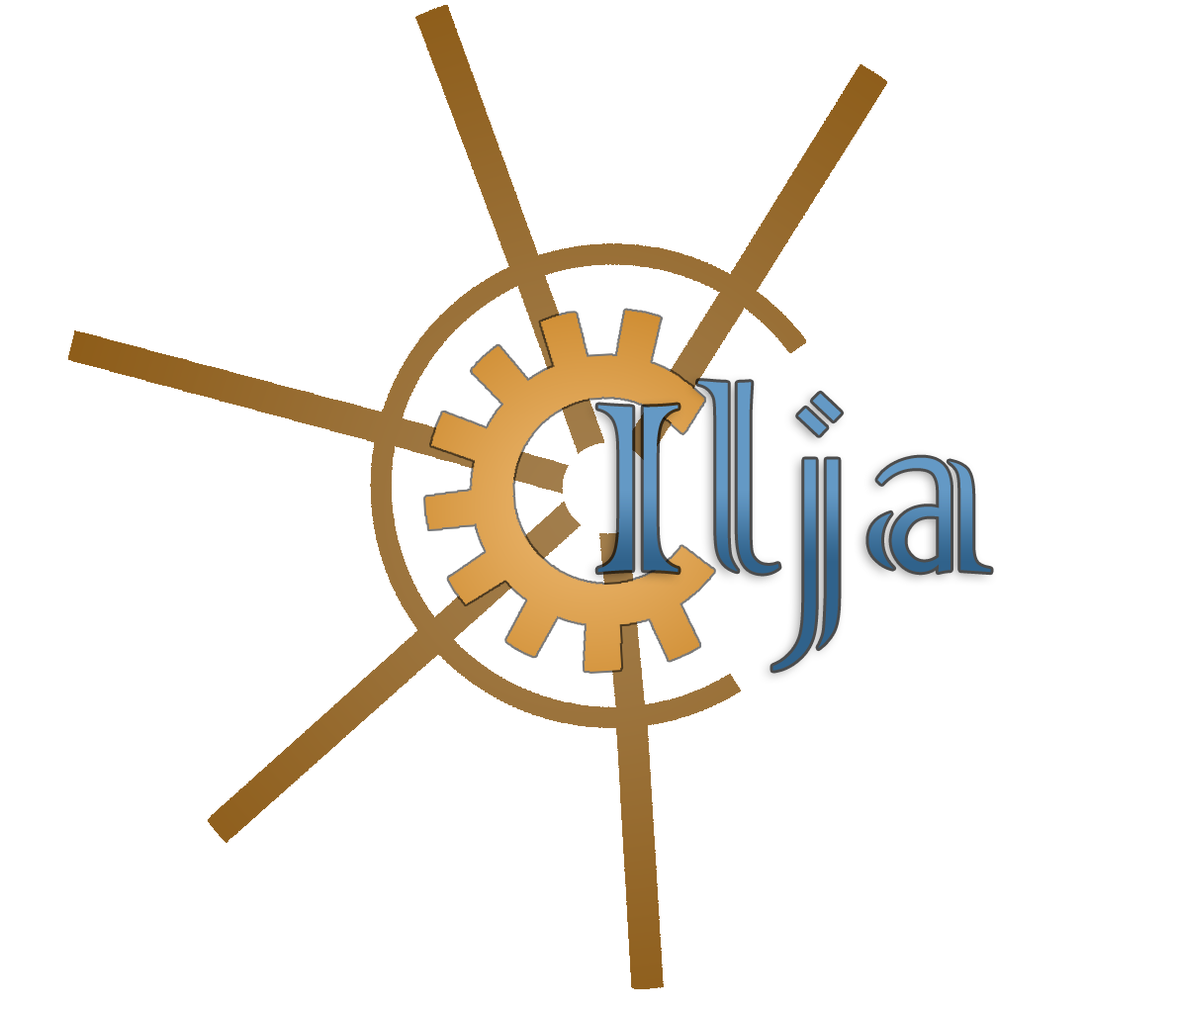
<style>
.page{position:relative;width:1178px;height:1013px;background:#ffffff}
.page>*{position:absolute;margin:0}
.t1{font:316.5px "ColonnaMT"}
</style>
<div class="page">
<p class="t1" style="left:597px;top:381px;width:394px;height:289px">Ilja</p>
</div>
